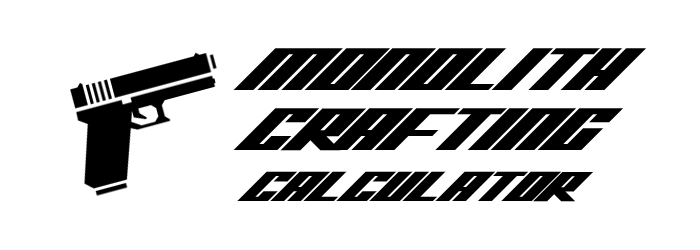
<style>
.page{position:relative;width:700px;height:250px;background:#ffffff}
.page>*{position:absolute;margin:0}
.t1{font:60px/60px "HypikRegular";color:#000000}
.t2{font:42px "HypikRegular";color:#000000}
</style>
<div class="page">
<p class="t1" style="left:233px;top:48px;width:413px;height:154px">MONOLITH<br>CRAFTING<br><span class="t2">CALCULATOR</span></p>
</div>
